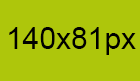
<style>
.page{position:relative;width:140px;height:81px;background:#aec60b}
.page>*{position:absolute;margin:0}
.t1{font:30px "ArialMT";color:#000000}
</style>
<div class="page">
<p class="t1" style="left:9px;top:27px;width:127px;height:28px">140x81px</p>
</div>
